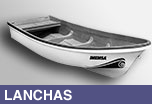
<style>
.page{position:relative;width:152px;height:104px}
.page>*{position:absolute;margin:0}
.t1{font:14px "Helvetica-Bold";color:#ffffff}
</style>
<div class="page">
<p class="t1" style="left:5px;top:89px;width:67px;height:12px">LANCHAS</p>
</div>
